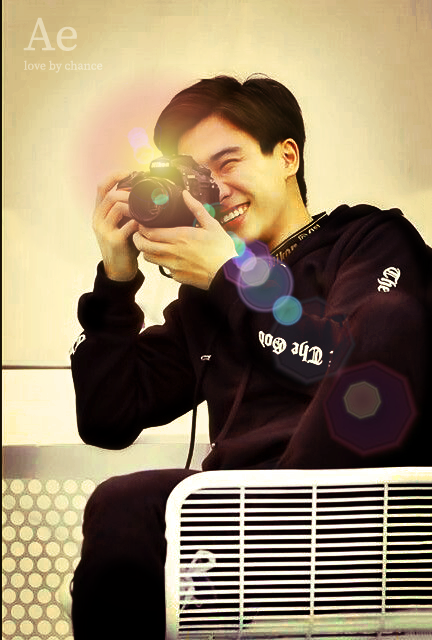
<style>
.page{position:relative;width:432px;height:640px}
.page>*{position:absolute;margin:0}
.t1{font:48px "SourceSerifRoman-Regular";color:#e9dcb8}
.t2{font:12px "SourceSerifRoman-Regular";color:#ece0bc}
</style>
<div class="page">
<p class="t1" style="left:23px;top:17px;width:54px;height:34px">Ae</p>
<p class="t2" style="left:24px;top:60px;width:79px;height:13px">love by chance</p>
</div>
